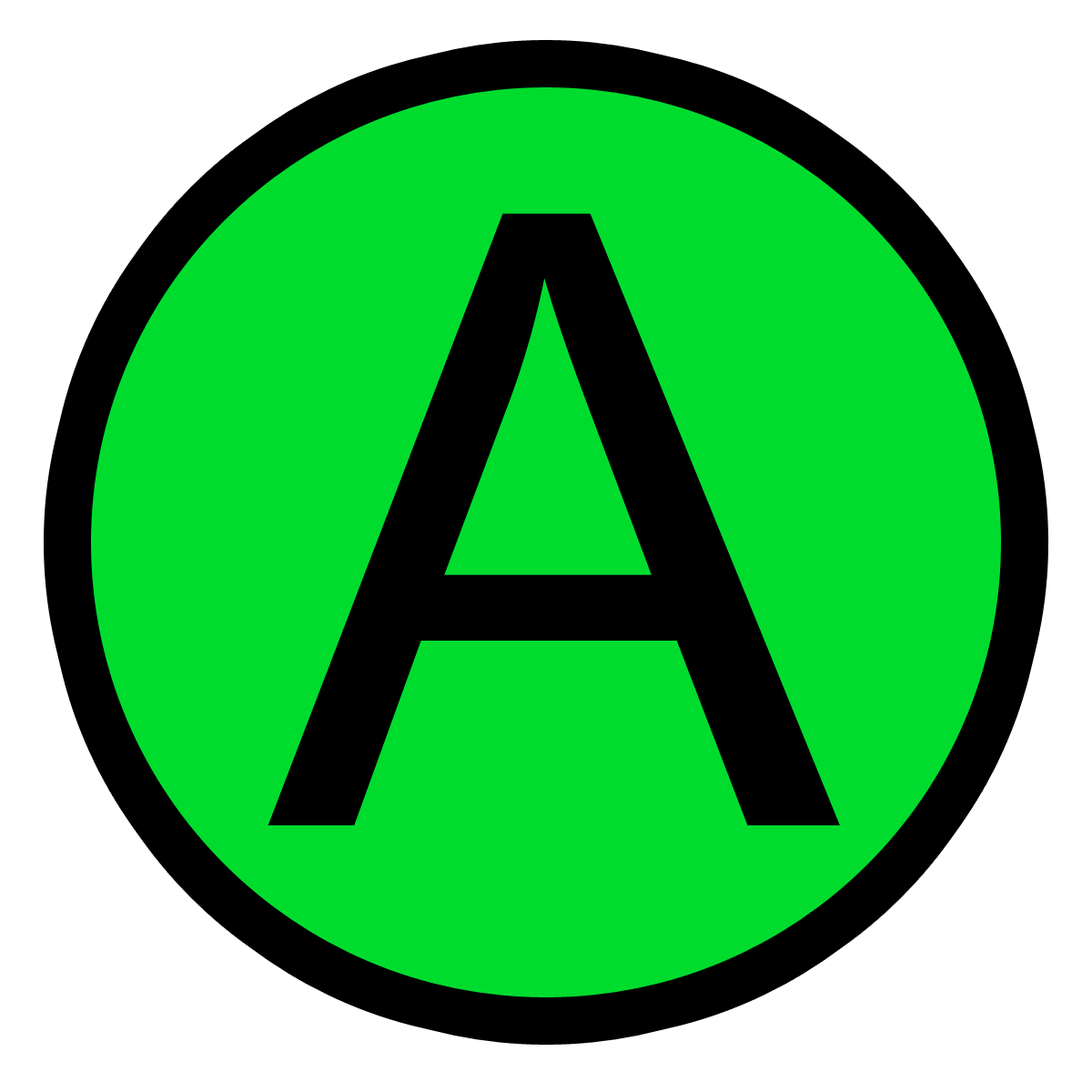
<style>
.page{position:relative;width:1092px;height:1092px;background:#00dc2e}
.page>*{position:absolute;margin:0}
.t1{font:853.1px "ArialMT";color:#000000}
</style>
<div class="page">
<p class="t1" style="left:268px;top:213px;width:572px;height:612px">A</p>
</div>
